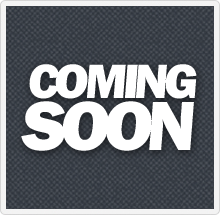
<style>
.page{position:relative;width:220px;height:215px}
.page>*{position:absolute;margin:0}
.t1{font:50.2px/52.2px "FranklinGothic-Heavy";letter-spacing:-0.08em;color:#ffffff;text-transform:uppercase}
.t2{font:72.2px/52.2px "FranklinGothic-Heavy";letter-spacing:-0.08em;color:#ffffff;text-transform:uppercase}
</style>
<div class="page">
<p class="t1" style="left:21px;top:64px;width:176px;height:87px;text-align:center">coming<br><span class="t2">soon</span></p>
</div>
